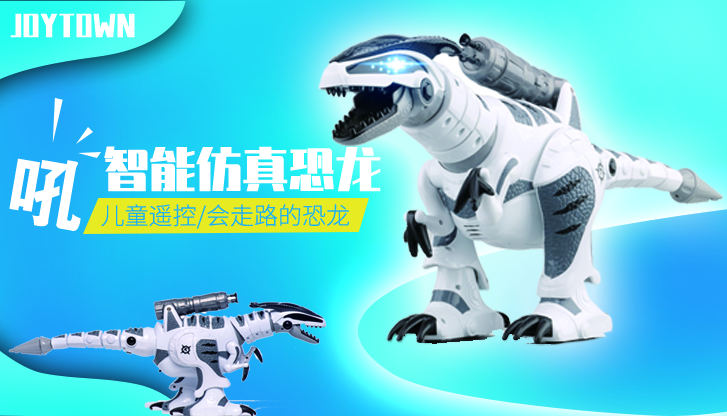
<style>
.page{position:relative;width:727px;height:416px}
.page>*{position:absolute;margin:0}
.t1{font:25.6px "ZhenyanGB-Regular";color:#ffffff}
.t2{font:46.1px "ZhenyanGB-Regular";color:#ffffff}
.t3{font:79.6px "FZDHTJW--GB1-0";color:#ffffff}
.t4{font:24px "SourceHanSansCN-Light";color:#1daff8}
</style>
<div class="page">
<p class="t1" style="left:10px;top:13px;width:125px;height:25px">JOYTOWN</p>
<p class="t2" style="left:104px;top:146px;width:277px;height:46px">智能仿真恐龙</p>
<p class="t3" style="left:9px;top:158px;width:72px;height:73px;rotate:10deg">吼</p>
<p class="t4" style="left:101px;top:204px;width:248px;height:25px">儿童遥控/会走路的恐龙</p>
</div>
